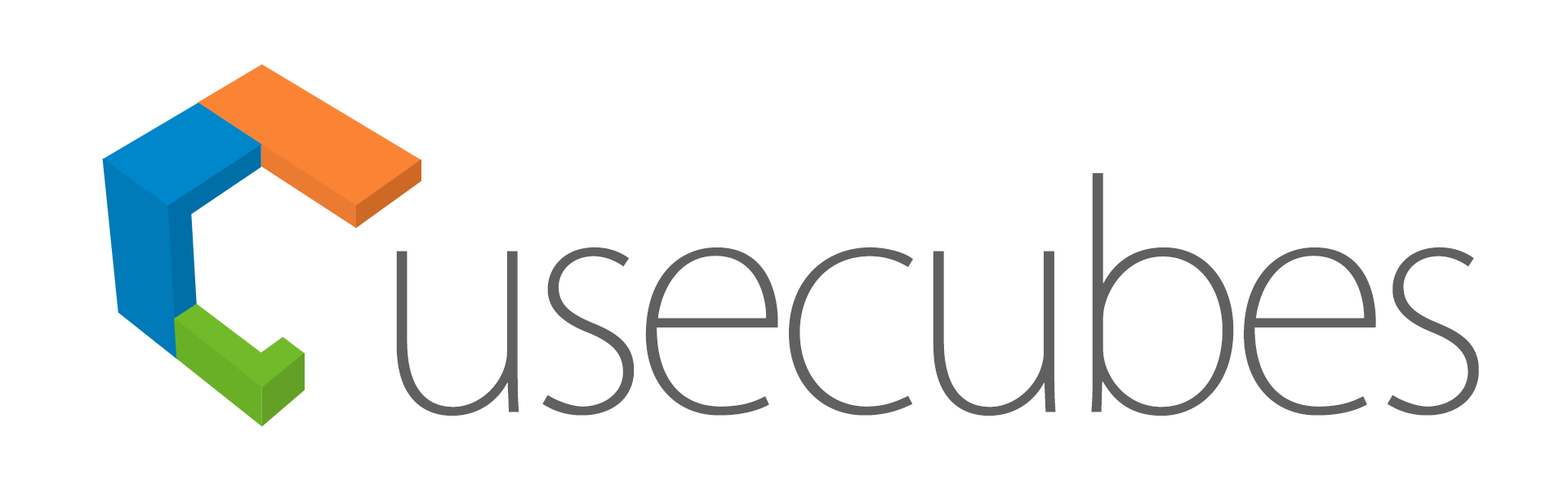
<style>
.page{position:relative;width:1568px;height:490px;background:#ffffff}
.page>*{position:absolute;margin:0}
.t1{font:300.2px "KozGoPr6N-ExtraLight";letter-spacing:-0.06em;color:#606060}
</style>
<div class="page">
<p class="t1" style="left:396px;top:173px;width:1083px;height:243px">usecubes</p>
</div>
